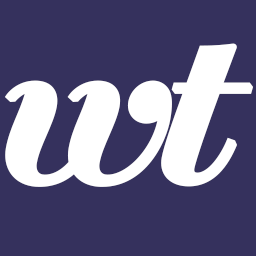
<style>
.page{position:relative;width:256px;height:256px;background:#35315d}
.page>*{position:absolute;margin:0}
.t1{font:250px "Sail-Regular";letter-spacing:-0.075em;color:#ffffff;font-weight:bold;font-style:italic}
</style>
<div class="page">
<p class="t1" style="left:4px;top:43px;width:249px;height:144px">wt</p>
</div>
